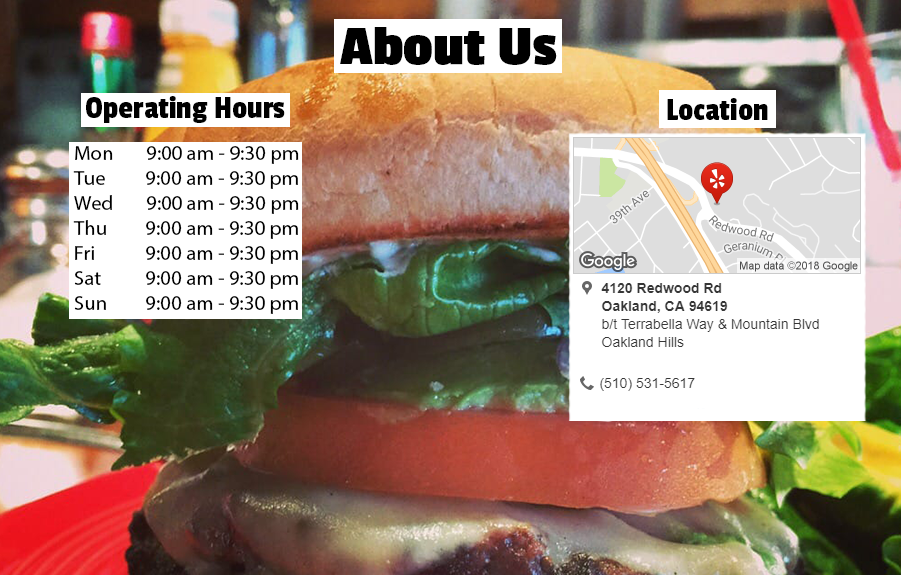
<style>
.page{position:relative;width:901px;height:575px}
.page>*{position:absolute;margin:0}
.t1{font:58.3px "PassionOne-Bold";color:#000000}
.t2{font:33.3px "PassionOne-Regular";color:#000000}
.t3{font:20.8px "MyriadPro-Regular";color:#000000}
</style>
<div class="page">
<p class="t1" style="left:340px;top:27px;width:217px;height:38px">About Us</p>
<p class="t2" style="left:86px;top:96px;width:199px;height:27px">Operating Hours</p>
<p class="t2" style="left:667px;top:98px;width:101px;height:22px">Location</p>
<p class="t3" style="left:73px;top:146px;width:226px;height:168px">Mon 9:00 am - 9:30 pm <br>Tue         9:00 am - 9:30 pm <br>Wed 9:00 am - 9:30 pm <br>Thu         9:00 am - 9:30 pm <br>Fri         9:00 am - 9:30 pm <br>Sat         9:00 am - 9:30 pm <br>Sun         9:00 am - 9:30 pm</p>
</div>
